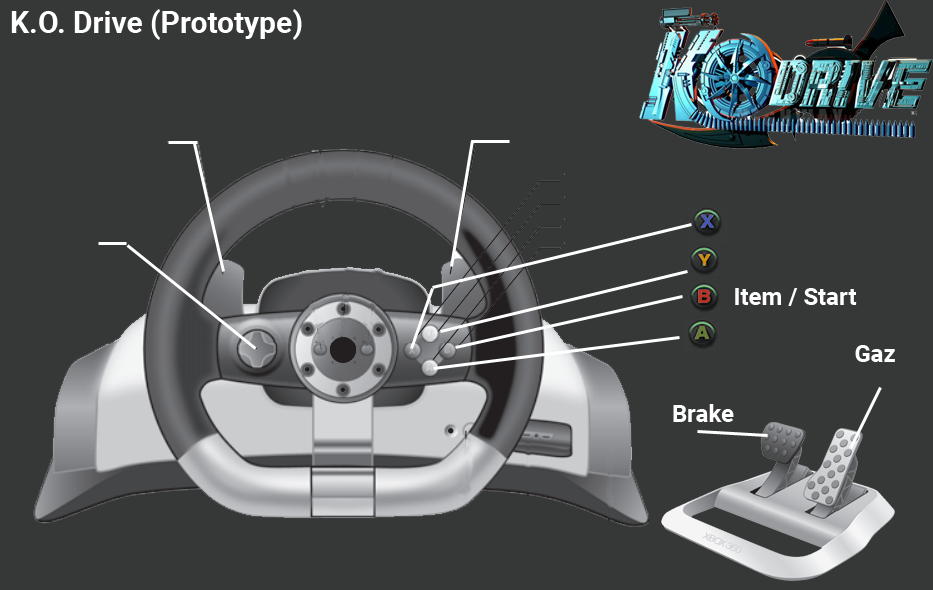
<style>
.page{position:relative;width:933px;height:590px;background:#363838}
.page>*{position:absolute;margin:0}
.t1{font:30px "Roboto-Bold";color:#ffffff}
.t2{font:24px "Roboto-Bold";color:#ffffff}
</style>
<div class="page">
<p class="t1" style="left:11px;top:9px;width:291px;height:31px">K.O. Drive (Prototype)</p>
<p class="t2" style="left:735px;top:288px;width:122px;height:18px">Item / Start</p>
<p class="t2" style="left:855px;top:345px;width:40px;height:17px">Gaz</p>
<p class="t2" style="left:673px;top:404px;width:61px;height:18px">Brake</p>
</div>
